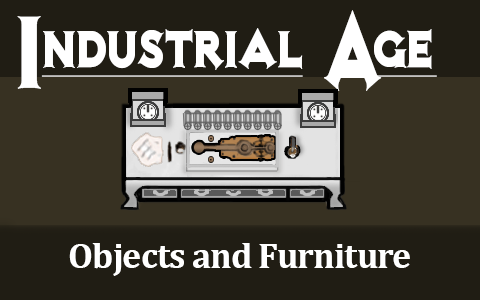
<style>
.page{position:relative;width:480px;height:300px;background:#201d14}
.page>*{position:absolute;margin:0}
.t1{font:51.7px "NotMaryKateNF";color:#ffffff;text-decoration:underline;scale:0.85 1}
.t2{font:103.4px "NotMaryKateNF";color:#ffffff;scale:0.85 1}
.t3{font:103.4px "NotMaryKateNF";letter-spacing:-0.15em;color:#ffffff;scale:0.64 1}
.t4{font:51.7px "NotMaryKateNF";letter-spacing:0.1em;color:#ffffff;text-decoration:underline;scale:0.85 1}
.t5{font:36px "Cambria-Bold";letter-spacing:-0.025em;color:#ffffff}
</style>
<div class="page">
<p class="t1" style="left:17px;top:10px;width:420px;height:81px"><span class="t2">I</span>ndustrial <span class="t3">A</span>g<span class="t4">e</span></p>
<p class="t5" style="left:69px;top:243px;width:341px;height:33px">Objects and Furniture</p>
</div>
